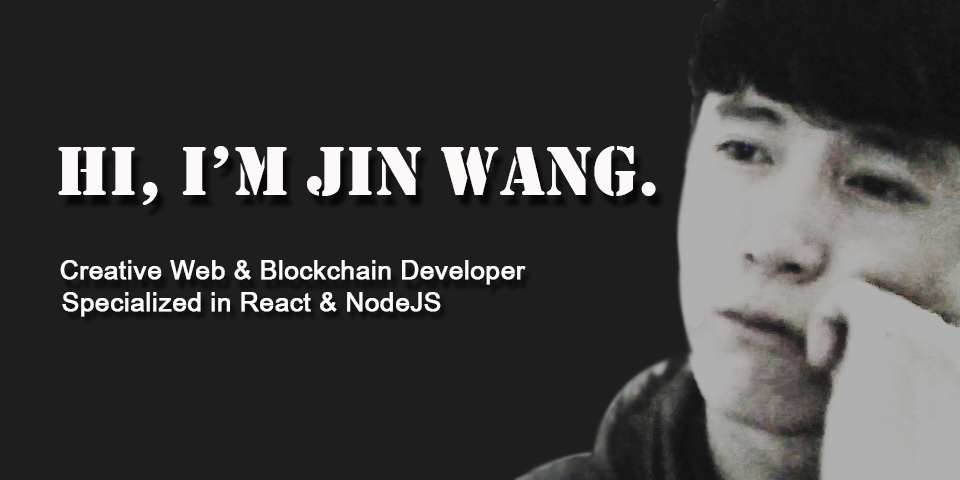
<style>
.page{position:relative;width:960px;height:480px;background:#1e1e1e}
.page>*{position:absolute;margin:0}
.t1{font:72px "Stencil";color:#fdf9f9}
.t2{font:26px "ArialUnicodeMS";color:#fdfbfb;font-weight:bold}
</style>
<div class="page">
<p class="t1" style="left:58px;top:146px;width:598px;height:59px">Hi, I’m Jin Wang.</p>
<p class="t2" style="left:60px;top:260px;width:466px;height:25px">Creative Web &amp; Blockchain Developer</p>
<p class="t2" style="left:62px;top:292px;width:379px;height:25px">Specialized in React &amp; NodeJS</p>
</div>
